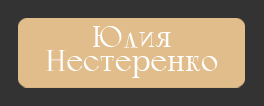
<style>
.page{position:relative;width:264px;height:106px;background:#e0bd8b}
.page>*{position:absolute;margin:0}
.t1{font:30px/24px "Calypso-Regular";color:#ffffff}
</style>
<div class="page">
<p class="t1" style="left:46px;top:26px;width:172px;height:52px;text-align:center">Юлия<br>Нестеренко</p>
</div>
